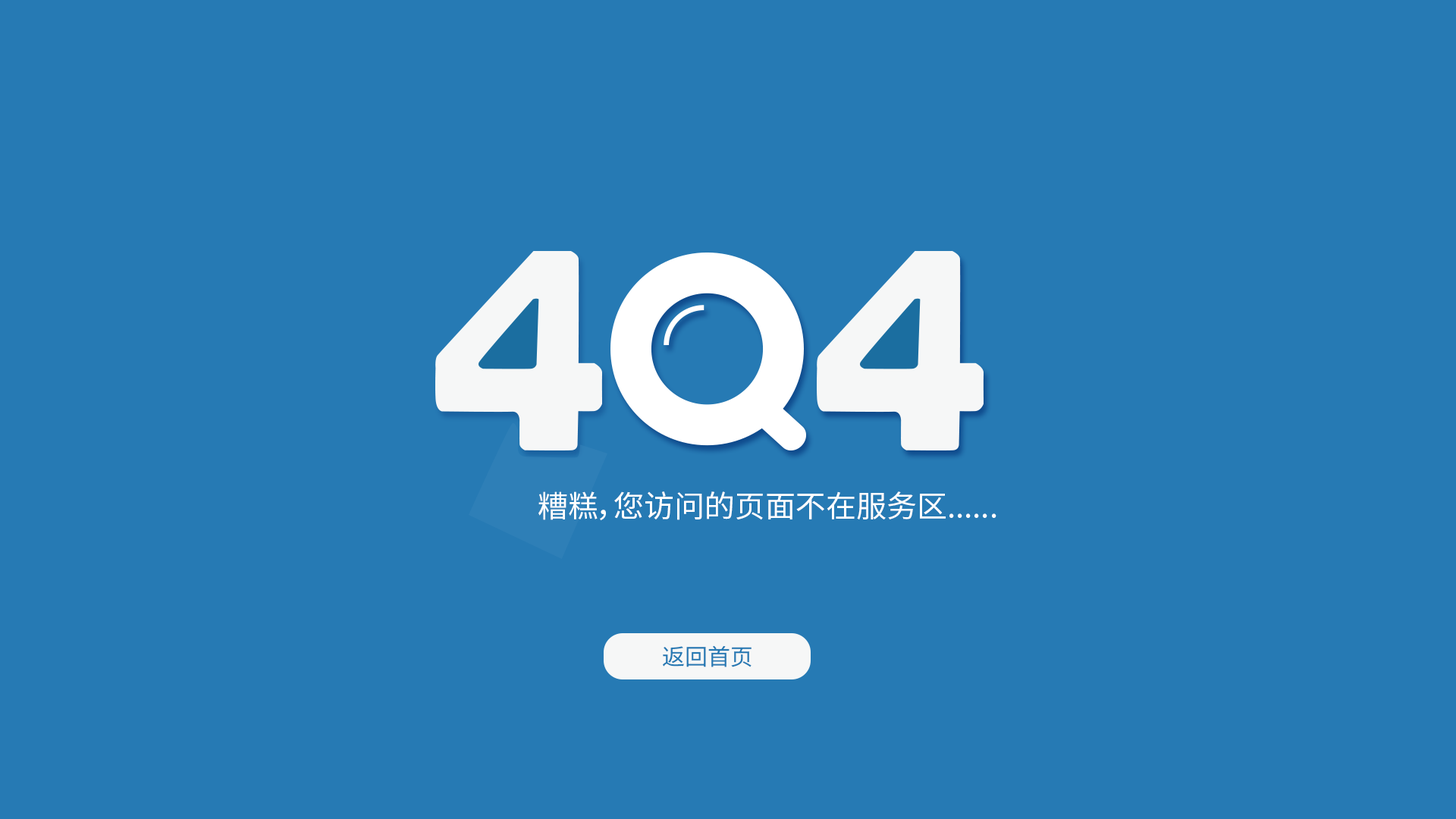
<style>
.page{position:relative;width:1456px;height:819px;background:#267ab4}
.page>*{position:absolute;margin:0}
.t1{font:30.3px "SourceHanSansCN-Regular";color:#ffffff}
.t2{font:22.7px "SourceHanSansCN-Regular";color:#267ab4}
</style>
<div class="page">
<p class="t1" style="left:538px;top:491px;width:458px;height:29px">糟糕，您访问的页面不在服务区......</p>
<p class="t2" style="left:663px;top:645px;width:88px;height:22px">返回首页</p>
</div>
